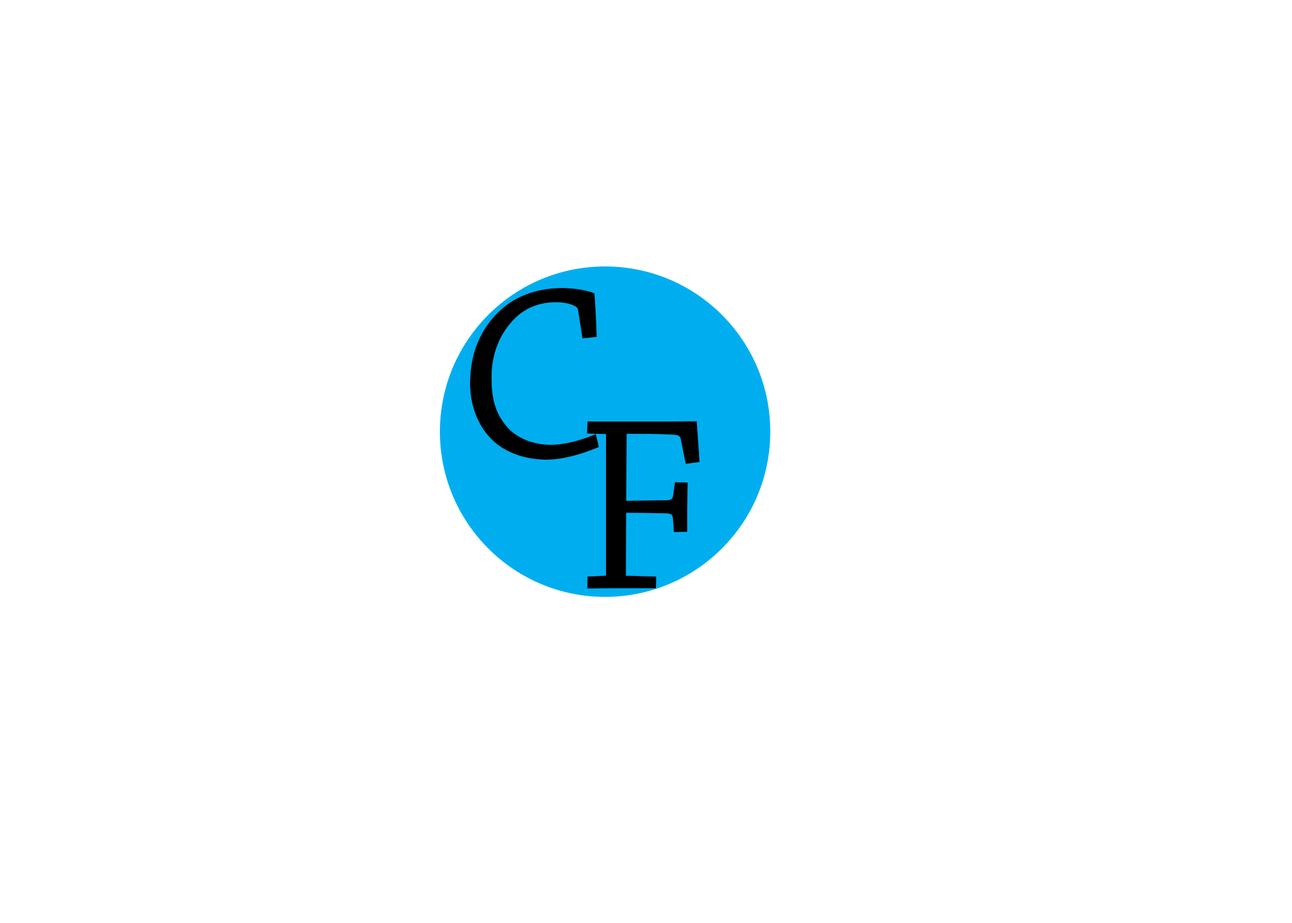
<style>
.page{position:relative;width:1292px;height:923px;background:#ffffff}
.page>*{position:absolute;margin:0}
.t1{font:256.4px "ChaparralPro-Regular";color:#000000}
</style>
<div class="page">
<p class="t1" style="left:470px;top:288px;width:129px;height:172px">C</p>
<p class="t1" style="left:587px;top:421px;width:113px;height:168px">F</p>
</div>
